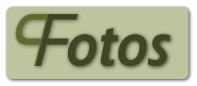
<style>
.page{position:relative;width:197px;height:86px;background:#bec49e}
.page>*{position:absolute;margin:0}
.t1{font:60.9px "ErasITC-Demi";color:#3e4723;font-style:italic;scale:0.83 1}
</style>
<div class="page">
<p class="t1" style="left:68px;top:27px;width:103px;height:39px">otos</p>
</div>
